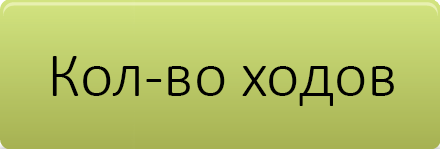
<style>
.page{position:relative;width:440px;height:149px}
.page>*{position:absolute;margin:0}
.t1{font:64px "Calibri-Light";color:#000000}
</style>
<div class="page">
<p class="t1" style="left:52px;top:56px;width:342px;height:50px">Кол-во ходов</p>
</div>
